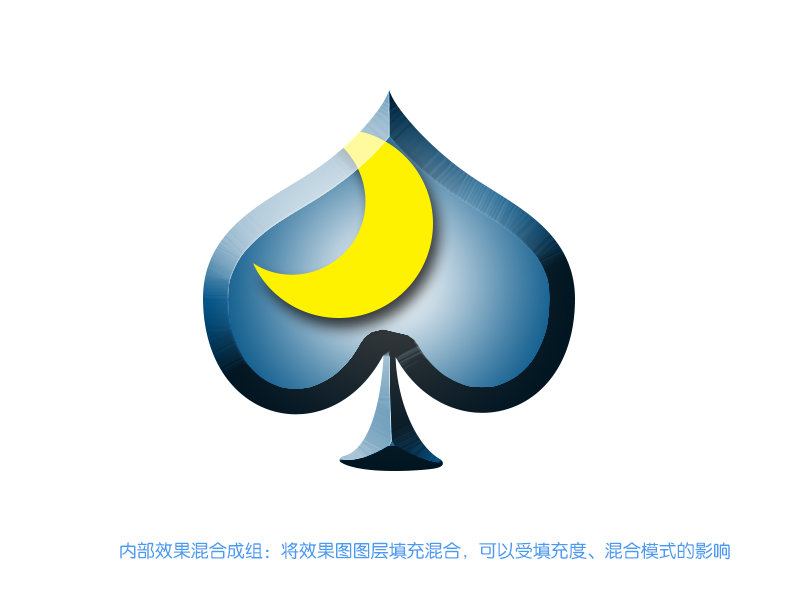
<style>
.page{position:relative;width:800px;height:600px;background:#ffffff}
.page>*{position:absolute;margin:0}
.t1{font:18px "FZY3JW--GB1-0";color:#489bf0}
</style>
<div class="page">
<p class="t1" style="left:120px;top:542px;width:610px;height:18px">内部效果混合成组：将效果图图层填充混合，可以受填充度、混合模式的影响</p>
</div>
